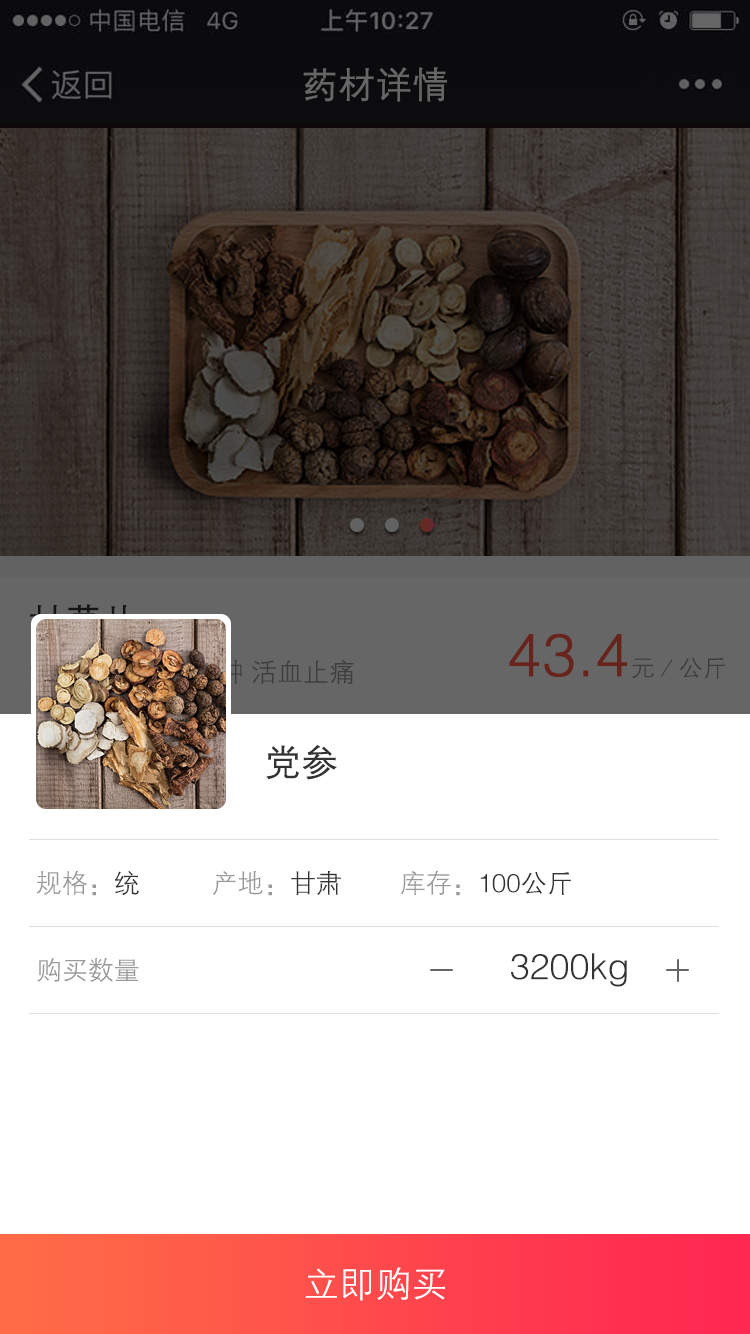
<style>
.page{position:relative;width:750px;height:1334px;background:#ffffff}
.page>*{position:absolute;margin:0}
.t1{font:36px "FZZDXJW--GB1-0";color:#666666;font-weight:bold}
.t2{font:60px "FZZDXJW--GB1-0";color:#66241d;font-weight:bold}
.t3{font:24px "FZZDXJW--GB1-0";color:#66241d}
.t4{font:36px "FZZDXJW--GB1-0";color:#333333;font-weight:bold}
.t5{font:26px "FZZDXJW--GB1-0";color:#333333}
.t6{font:26px "FZZDXJW--GB1-0";color:#999999}
.t7{font:36px "FZZDXJW--GB1-0";color:#333333}
.t8{font:36px "FZZDXJW--GB1-0";color:#ffffff}
</style>
<div class="page">
<p class="t1" style="left:303px;top:67px;width:144px;height:35px">药材详情</p>
<p class="t2" style="left:509px;top:633px;width:216px;height:46px">43.4<span class="t3">元／公斤</span></p>
<p class="t4" style="left:266px;top:745px;width:71px;height:35px">党参</p>
<p class="t5" style="left:36px;top:870px;width:535px;height:26px"><span class="t6">规格：</span>统         <span class="t6"> 产地：</span>甘肃        <span class="t6">库存：</span>100公斤</p>
<p class="t7" style="left:511px;top:953px;width:116px;height:34px">3200kg</p>
<p class="t6" style="left:37px;top:957px;width:102px;height:25px">购买数量</p>
<p class="t8" style="left:305px;top:1267px;width:140px;height:34px">立即购买</p>
</div>
